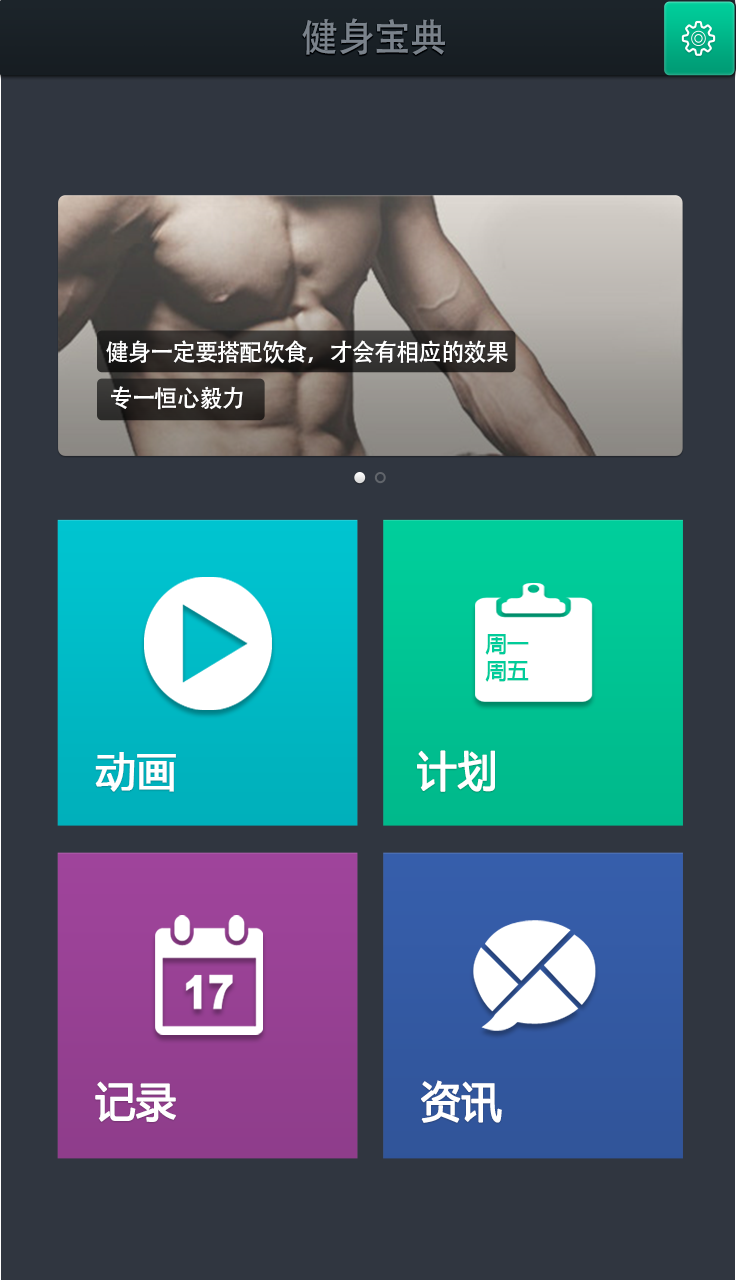
<style>
.page{position:relative;width:736px;height:1280px;background:#303640}
.page>*{position:absolute;margin:0}
.t1{font:38.9px "AdobeHeitiStd-Regular";letter-spacing:-0.02em;color:#7a828b;scale:0.95 1}
.t2{font:23.9px/46.8px "AdobeHeitiStd-Regular";letter-spacing:-0.02em;color:#ffffff;scale:0.95 1}
.t3{font:21.9px "MicrosoftYaHei";color:#00cc9a;font-weight:bold;scale:0.95 1}
.t4{font:41.6px "MicrosoftYaHei";color:#ffffff;font-weight:bold;scale:0.95 1}
</style>
<div class="page">
<p class="t1" style="left:302px;top:18px;width:143px;height:37px">健身宝典</p>
<p class="t2" style="left:106px;top:340px;width:402px;height:70px">健身一定要搭配饮食，才会有相应的效果<br> 专一恒心毅力</p>
<p class="t3" style="left:485px;top:634px;width:44px;height:21px">周一</p>
<p class="t3" style="left:485px;top:661px;width:44px;height:21px">周五</p>
<p class="t4" style="left:417px;top:750px;width:78px;height:42px">计划</p>
<p class="t4" style="left:95px;top:752px;width:81px;height:40px">动画</p>
<p class="t4" style="left:95px;top:1081px;width:81px;height:41px">记录</p>
<p class="t4" style="left:421px;top:1080px;width:81px;height:43px">资讯</p>
</div>
